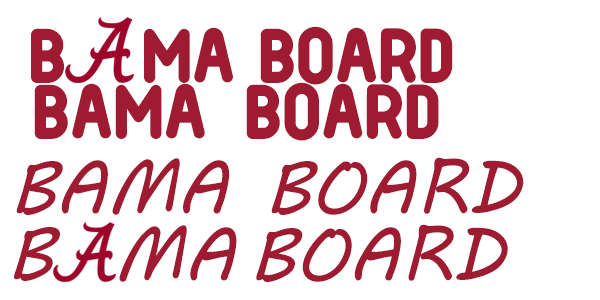
<style>
.page{position:relative;width:600px;height:300px;background:#ffffff}
.page>*{position:absolute;margin:0}
.t1{font:75px "Nord-Bold";color:#9e1b32;text-transform:uppercase}
.t2{font:75px "MVBoli";color:#9e1b32;text-transform:uppercase}
</style>
<div class="page">
<p class="t1" style="left:31px;top:28px;width:33px;height:55px">B</p>
<p class="t1" style="left:144px;top:27px;width:89px;height:56px">MA</p>
<p class="t1" style="left:260px;top:26px;width:193px;height:59px">BOARD</p>
<p class="t1" style="left:34px;top:82px;width:405px;height:59px">Bama Board</p>
<p class="t2" style="left:16px;top:157px;width:508px;height:58px">Bama Board</p>
<p class="t2" style="left:14px;top:227px;width:46px;height:54px">B</p>
<p class="t2" style="left:119px;top:225px;width:118px;height:57px">MA</p>
<p class="t2" style="left:256px;top:224px;width:252px;height:58px">Board</p>
</div>
